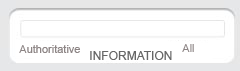
<style>
.page{position:relative;width:240px;height:71px;background:#ffffff}
.page>*{position:absolute;margin:0}
.t1{font:11px "ArialMT";color:#8c8484}
.t2{font:12px "ArialMT";color:#666666}
</style>
<div class="page">
<p class="t1" style="left:19px;top:45px;width:61px;height:8px">Authoritative</p>
<p class="t2" style="left:90px;top:51px;width:82px;height:9px">INFORMATION</p>
<p class="t1" style="left:182px;top:44px;width:12px;height:8px">All</p>
</div>
